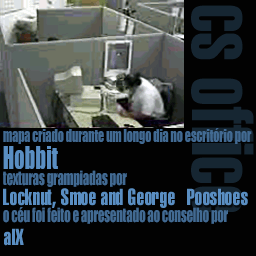
<style>
.page{position:relative;width:256px;height:256px;background:#020202}
.page>*{position:absolute;margin:0}
.t1{font:17.3px "Impact";letter-spacing:-0.01em;color:#426a92;scale:0.7 1}
.t2{font:29.4px "Impact";color:#5a8ec2;scale:0.7 1}
.t3{font:18px "Impact";letter-spacing:-0.01em;color:#426a92;scale:0.7 1}
</style>
<div class="page">
<p class="t1" style="left:3px;top:128px;width:249px;height:16px">mapa criado durante um longo dia no escritório por</p>
<p class="t2" style="left:3px;top:146px;width:55px;height:23px">Hobbit</p>
<p class="t3" style="left:3px;top:170px;width:124px;height:17px">texturas grampiadas por</p>
<p class="t3" style="left:3px;top:207px;width:225px;height:17px">o céu foi feito e apresentado ao conselho por</p>
</div>
